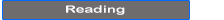
<style>
.page{position:relative;width:224px;height:20px;background:#6e6c6c}
.page>*{position:absolute;margin:0}
.t1{font:10.2px "ArialRoundedMTBold";color:#fcfcfc;scale:1.47 1}
</style>
<div class="page">
<p class="t1" style="left:66px;top:5px;width:59px;height:10px">Reading</p>
</div>
